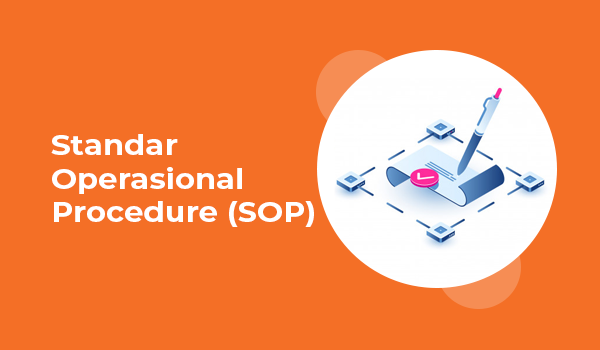
<style>
.page{position:relative;width:600px;height:350px;background:#f46f26}
.page>*{position:absolute;margin:0}
.t1{font:28px "Montserrat-Bold";color:#ffffff;scale:1.1 1}
</style>
<div class="page">
<p class="t1" style="left:51px;top:134px;width:263px;height:93px">Standar<br>Operasional<br>Procedure (SOP)</p>
</div>
